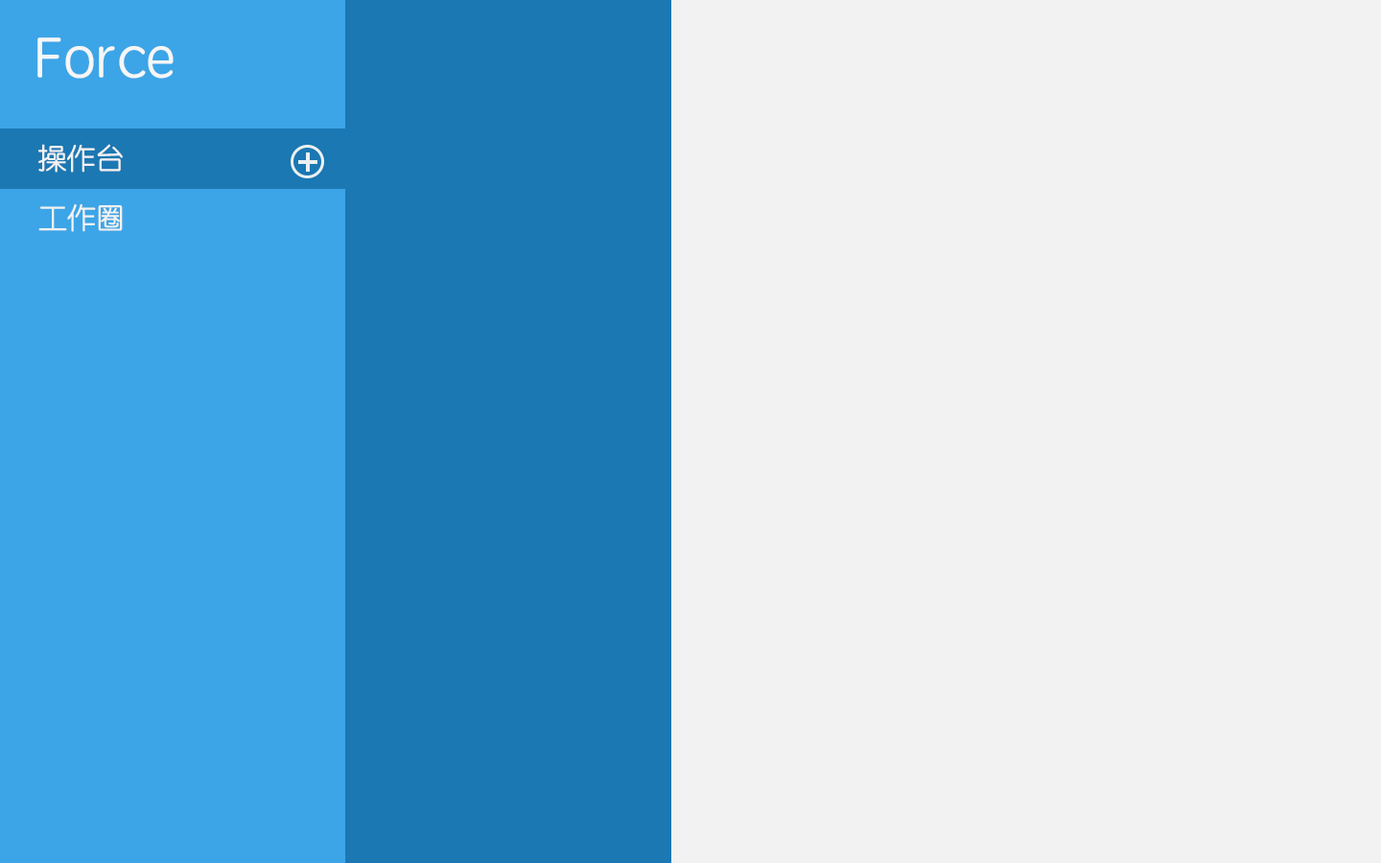
<style>
.page{position:relative;width:1381px;height:863px;background:#f2f2f2}
.page>*{position:absolute;margin:0}
.t1{font:57.6px "STYuanti-SC-Regular";color:#f6f6f6}
.t2{font:28.8px "STYuanti-SC-Regular";color:#f2f2f2}
</style>
<div class="page">
<p class="t1" style="left:37px;top:37px;width:137px;height:42px">Force</p>
<p class="t2" style="left:38px;top:144px;width:85px;height:29px">操作台</p>
<p class="t2" style="left:38px;top:204px;width:85px;height:28px">工作圈</p>
</div>
